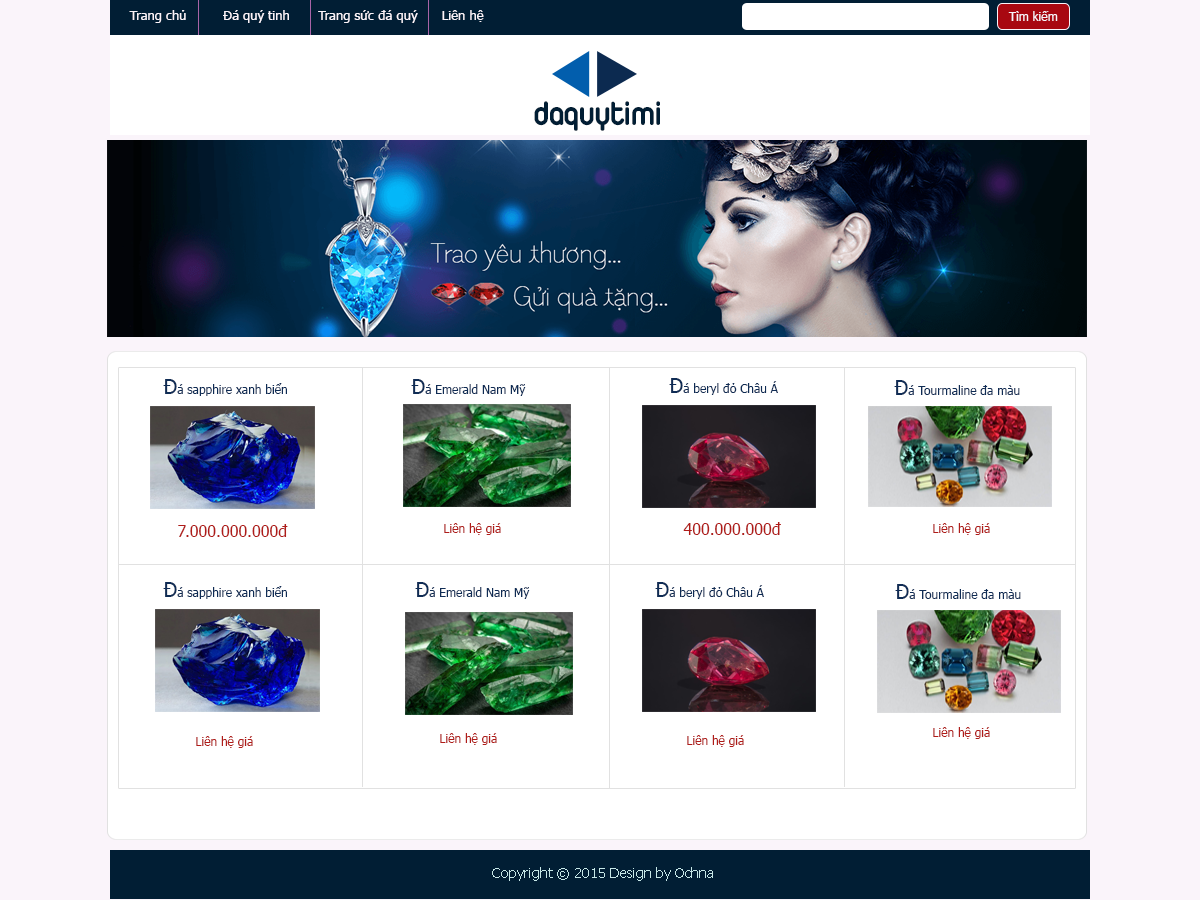
<style>
.page{position:relative;width:1200px;height:900px;background:#ffffff}
.page>*{position:absolute;margin:0}
.t1{font:13px "Tahoma";color:#faf4fa}
.t2{font:12px "Tahoma";color:#faf4fa}
.t3{font:36px "UTMDuepuntozeroBold";color:#011e34}
.t4{font:12px "Tahoma";color:#0f2c55}
.t5{font:20px "Tahoma";color:#0f2c55}
.t6{font:16px "Tahoma";color:#b01c19}
.t7{font:12px "Tahoma";color:#b01c19}
.t8{font:14px "Tahoma";color:#c7e8e8}
</style>
<div class="page">
<p class="t1" style="left:129px;top:10px;width:355px;height:13px">Trang chủ         Đá quý tinh       Trang sức đá quý      Liên hệ</p>
<p class="t2" style="left:1008px;top:11px;width:50px;height:10px">Tìm kiếm</p>
<p class="t3" style="left:534px;top:101px;width:126px;height:30px">daquytimi</p>
<p class="t4" style="left:163px;top:379px;width:124px;height:17px"><span class="t5">Đ</span>á sapphire xanh biển</p>
<p class="t4" style="left:411px;top:379px;width:115px;height:17px"><span class="t5">Đ</span>á Emerald Nam Mỹ</p>
<p class="t4" style="left:669px;top:378px;width:109px;height:17px"><span class="t5">Đ</span>á beryl đỏ Châu Á</p>
<p class="t4" style="left:894px;top:380px;width:126px;height:15px"><span class="t5">Đ</span>á Tourmaline đa màu</p>
<p class="t6" style="left:178px;top:524px;width:110px;height:13px">7.000.000.000đ</p>
<p class="t7" style="left:444px;top:523px;width:57px;height:12px">Liên hệ giá</p>
<p class="t6" style="left:683px;top:522px;width:98px;height:13px">400.000.000đ</p>
<p class="t7" style="left:933px;top:523px;width:57px;height:12px">Liên hệ giá</p>
<p class="t4" style="left:163px;top:582px;width:124px;height:17px"><span class="t5">Đ</span>á sapphire xanh biển</p>
<p class="t4" style="left:415px;top:582px;width:115px;height:17px"><span class="t5">Đ</span>á Emerald Nam Mỹ</p>
<p class="t4" style="left:655px;top:582px;width:109px;height:17px"><span class="t5">Đ</span>á beryl đỏ Châu Á</p>
<p class="t4" style="left:895px;top:584px;width:126px;height:15px"><span class="t5">Đ</span>á Tourmaline đa màu</p>
<p class="t7" style="left:196px;top:736px;width:57px;height:12px">Liên hệ giá</p>
<p class="t7" style="left:440px;top:733px;width:57px;height:12px">Liên hệ giá</p>
<p class="t7" style="left:687px;top:735px;width:57px;height:12px">Liên hệ giá</p>
<p class="t7" style="left:933px;top:727px;width:57px;height:12px">Liên hệ giá</p>
<p class="t8" style="left:492px;top:867px;width:221px;height:14px">Copyright © 2015 Design by Ochna</p>
</div>
